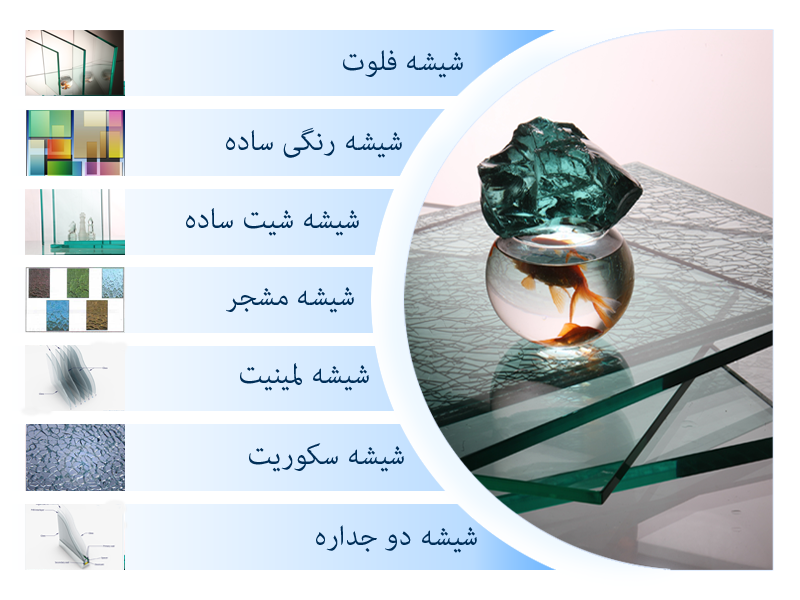
<style>
.page{position:relative;width:800px;height:600px}
.page>*{position:absolute;margin:0}
.t1{font:39.3px "AdobeArabic-Regular";color:#002e58}
</style>
<div class="page">
<p class="t1" style="left:343px;top:50px;width:120px;height:28px">شیشه فلوت</p>
<p class="t1" style="left:226px;top:127px;width:176px;height:31px">شیشه رنگی ساده</p>
<p class="t1" style="left:186px;top:208px;width:173px;height:28px">شیشه شیت ساده</p>
<p class="t1" style="left:226px;top:287px;width:128px;height:26px">شیشه مشجر</p>
<p class="t1" style="left:240px;top:363px;width:129px;height:28px">شیشه لمینیت</p>
<p class="t1" style="left:249px;top:443px;width:155px;height:29px">شیشه سکوریت</p>
<p class="t1" style="left:316px;top:525px;width:161px;height:28px">شیشه دو جداره</p>
</div>
